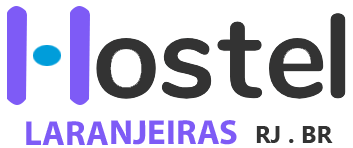
<style>
.page{position:relative;width:353px;height:148px;background:#ffffff}
.page>*{position:absolute;margin:0}
.t1{font:34.8px "MyriadPro-Bold";color:#7e5bf6}
.t2{font:24px "MyanmarText-Bold";color:#333333}
</style>
<div class="page">
<p class="t1" style="left:26px;top:120px;width:211px;height:25px">LARANJEIRAS</p>
<p class="t2" style="left:256px;top:126px;width:77px;height:17px">RJ . BR</p>
</div>
